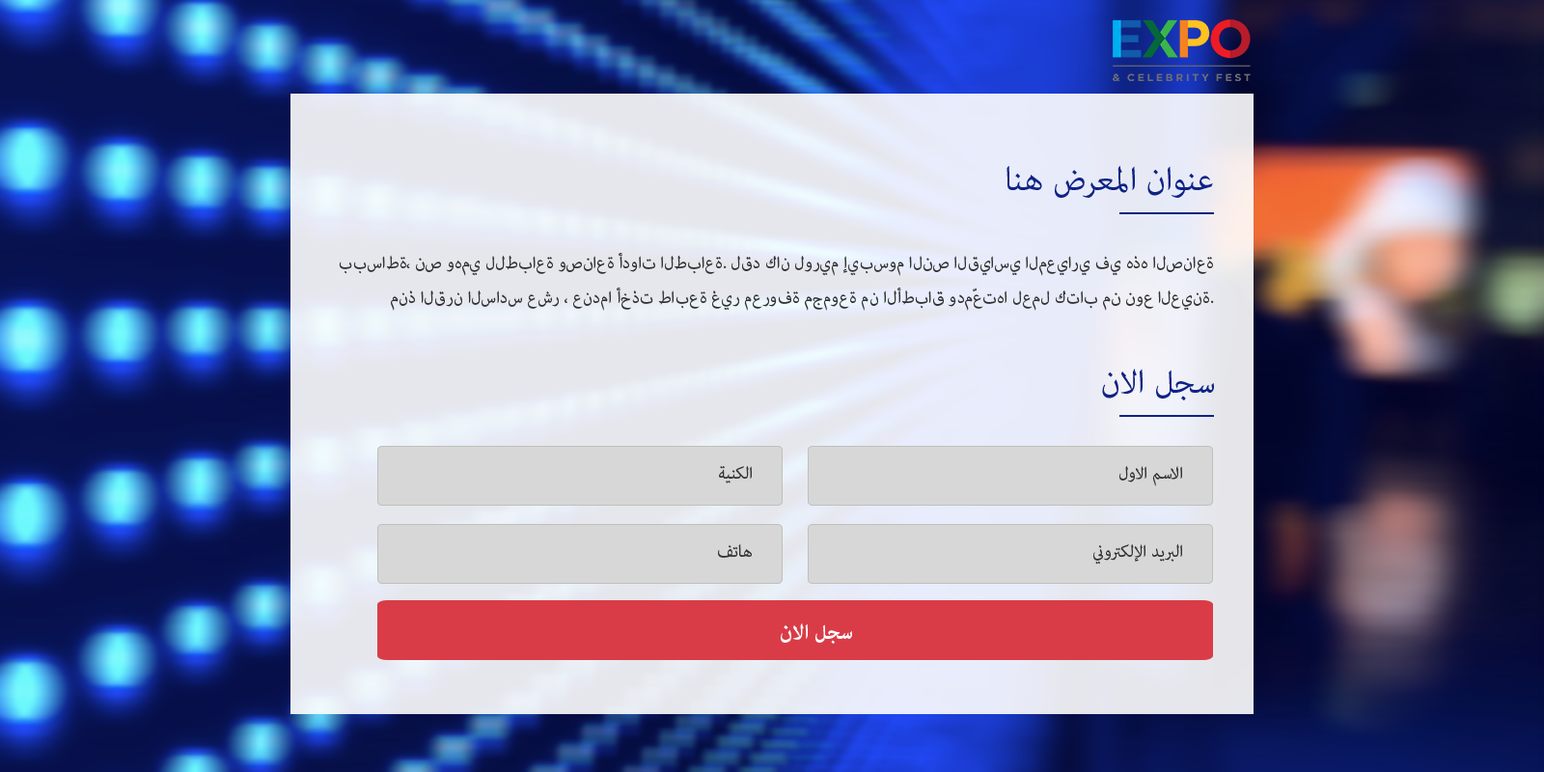
<style>
.page{position:relative;width:1544px;height:772px}
.page>*{position:absolute;margin:0}
.t1{font:46.3px "AdobeArabic-Regular";color:#0e2384}
.t2{font:23.2px/34.7px "AdobeArabic-Regular";color:#333333}
.t3{font:23.2px "AdobeArabic-Regular";color:#333333}
.t4{font:29px "AdobeArabic-Bold";color:#ffffff}
</style>
<div class="page">
<p class="t1" style="left:1007px;top:165px;width:206px;height:33px">عنوان المعرض هنا</p>
<p class="t2" style="left:339px;top:253px;width:875px;height:58px;text-align:right">ببساطة، نص وهمي للطباعة وصناعة أدوات الطباعة. لقد كان لوريم إيبسوم النص القياسي المعياري في هذه الصناعة منذ القرن السادس عشر ، عندما أخذت طابعة غير معروفة مجموعة من الأطباق ودمّعتها لعمل كتاب من نوع العينة.</p>
<p class="t1" style="left:1102px;top:369px;width:112px;height:32px">سجل الان</p>
<p class="t3" style="left:719px;top:466px;width:33px;height:18px">الكنية</p>
<p class="t3" style="left:1120px;top:466px;width:62px;height:20px">الاسم الاول</p>
<p class="t3" style="left:718px;top:544px;width:34px;height:14px">هاتف</p>
<p class="t3" style="left:1094px;top:544px;width:88px;height:21px">البريد الإلكتروني</p>
<p class="t4" style="left:781px;top:624px;width:71px;height:20px">سجل الان</p>
</div>
